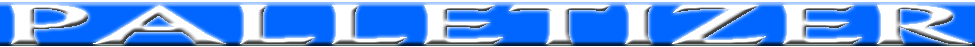
<style>
.page{position:relative;width:975px;height:47px;background:#0066ff}
.page>*{position:absolute;margin:0}
.t1{font:55.7px "Narkisim";color:#ffffff;scale:3.39 1}
</style>
<div class="page">
<p class="t1" style="left:11px;top:5px;width:961px;height:39px">PALLETIZER</p>
</div>
